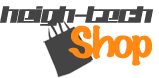
<style>
.page{position:relative;width:159px;height:78px;background:#ffffff}
.page>*{position:absolute;margin:0}
.t1{font:19.1px "Kitchenpolice";letter-spacing:-0.06em;color:#444444;scale:1.37 1}
.t2{font:38.2px "MarkerFelt-Thin";letter-spacing:-0.06em;color:#ff8913;scale:1.37 1}
</style>
<div class="page">
<p class="t1" style="left:0px;top:6px;width:153px;height:20px">Heigh-TEch</p>
<p class="t2" style="left:68px;top:25px;width:84px;height:41px">Shop</p>
</div>
